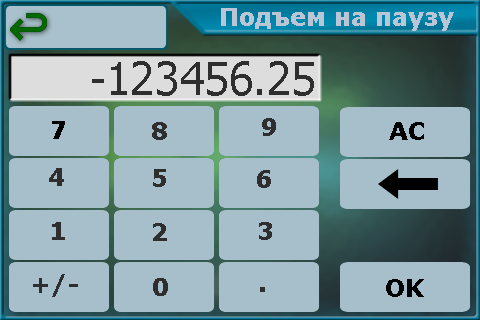
<style>
.page{position:relative;width:480px;height:320px;background:#a6bfcb}
.page>*{position:absolute;margin:0}
.t1{font:24px "Verdana-Bold";color:#bac5d5}
.t2{font:45px "Tahoma";color:#2e2e2e}
.t3{font:24px "Verdana-Bold";color:#000000}
.t4{font:24px "Verdana-Bold";color:#2e2e2e}
</style>
<div class="page">
<p class="t1" style="left:221px;top:8px;width:233px;height:23px">Подъем на паузу</p>
<p class="t2" style="left:92px;top:61px;width:222px;height:35px">-123456.25</p>
<p class="t3" style="left:52px;top:121px;width:13px;height:18px">7</p>
<p class="t4" style="left:152px;top:122px;width:15px;height:18px">8</p>
<p class="t4" style="left:262px;top:118px;width:14px;height:18px">9</p>
<p class="t3" style="left:389px;top:122px;width:35px;height:18px">AC</p>
<p class="t4" style="left:49px;top:168px;width:15px;height:18px">4</p>
<p class="t4" style="left:153px;top:169px;width:13px;height:18px">5</p>
<p class="t4" style="left:257px;top:170px;width:14px;height:18px">6</p>
<p class="t4" style="left:52px;top:222px;width:13px;height:18px">1</p>
<p class="t4" style="left:259px;top:222px;width:13px;height:18px">3</p>
<p class="t4" style="left:153px;top:223px;width:14px;height:18px">2</p>
<p class="t4" style="left:33px;top:274px;width:45px;height:23px">+/-</p>
<p class="t4" style="left:153px;top:278px;width:15px;height:18px">0</p>
<p class="t3" style="left:386px;top:279px;width:38px;height:18px">OK</p>
</div>
